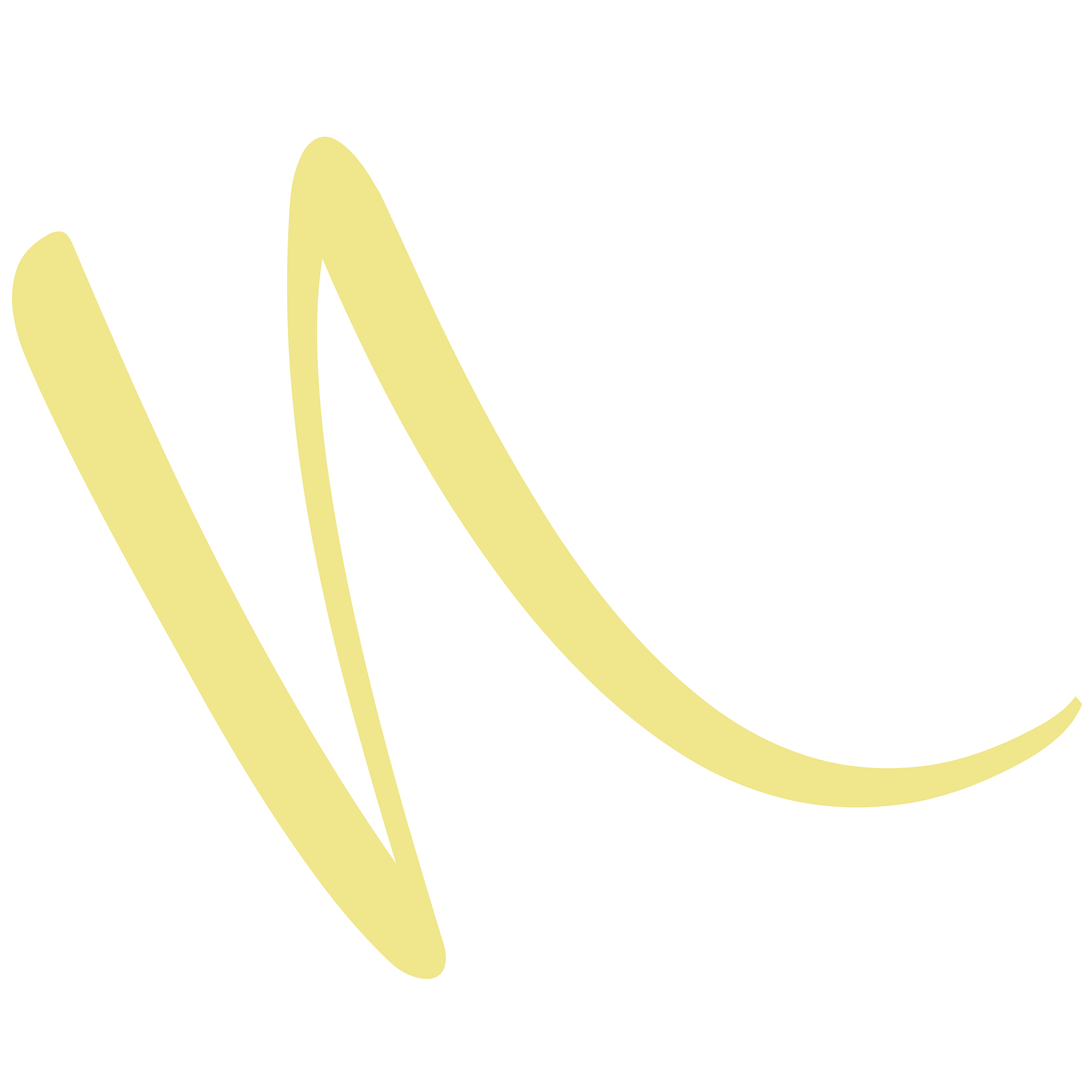
<style>
.page{position:relative;width:1092px;height:1092px;background:#ffffff}
.page>*{position:absolute;margin:0}
.t1{font:1023.7px "Montez-Regular";color:#f0e68c}
</style>
<div class="page">
<p class="t1" style="left:12px;top:136px;width:1070px;height:843px;rotate:-29deg">N</p>
</div>
